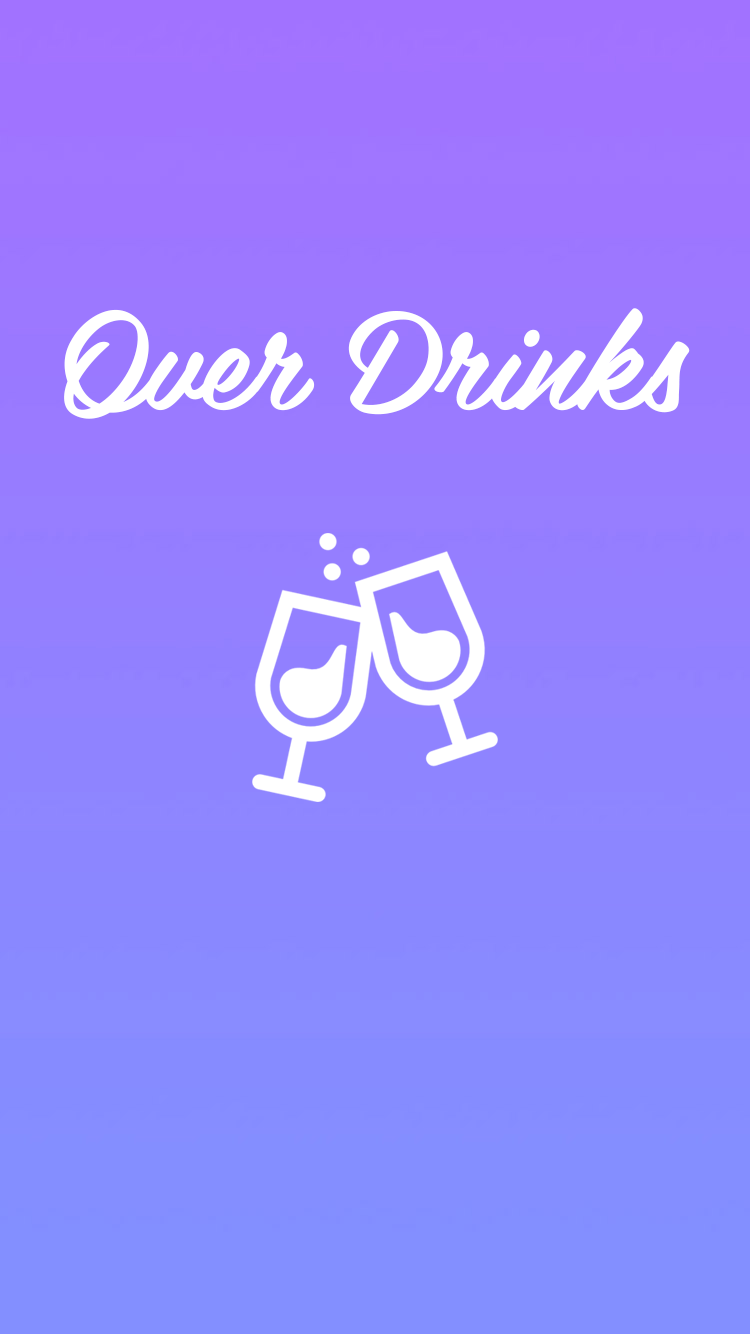
<style>
.page{position:relative;width:750px;height:1334px}
.page>*{position:absolute;margin:0}
.t1{font:136.4px "Belinda";color:#ffffff}
</style>
<div class="page">
<p class="t1" style="left:64px;top:308px;width:626px;height:111px">Over Drinks</p>
</div>
